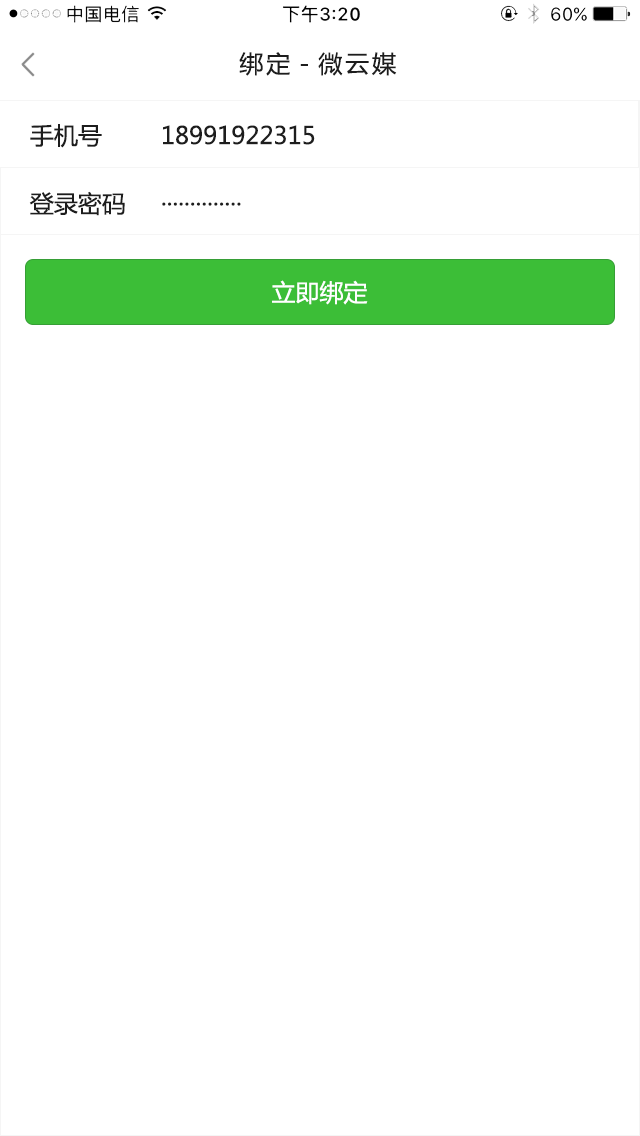
<style>
.page{position:relative;width:640px;height:1136px;background:#ffffff}
.page>*{position:absolute;margin:0}
.t1{font:24px "MicrosoftYaHei";letter-spacing:0.12em;color:#1d1d1d;font-variant:small-caps}
.t2{font:24px/68px "MicrosoftYaHei";color:#1d1d1d;font-variant:small-caps}
.t3{font:24px "MicrosoftYaHei";color:#ffffff;font-variant:small-caps}
</style>
<div class="page">
<p class="t1" style="left:239px;top:52px;width:158px;height:24px">绑定-微云媒</p>
<p class="t2" style="left:29px;top:124px;width:96px;height:92px">手机号<br>登录密码</p>
<p class="t2" style="left:162px;top:125px;width:153px;height:81px">18991922315<br>··············</p>
<p class="t3" style="left:272px;top:280px;width:96px;height:25px">立即绑定</p>
</div>
